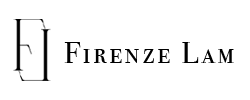
<style>
.page{position:relative;width:250px;height:100px;background:#ffffff}
.page>*{position:absolute;margin:0}
.t1{font:30px "BodoniSvtyTwoSCITCTT-Book";letter-spacing:0.1em;color:#000000}
</style>
<div class="page">
<p class="t1" style="left:64px;top:42px;width:170px;height:21px">Firenze Lam</p>
</div>
